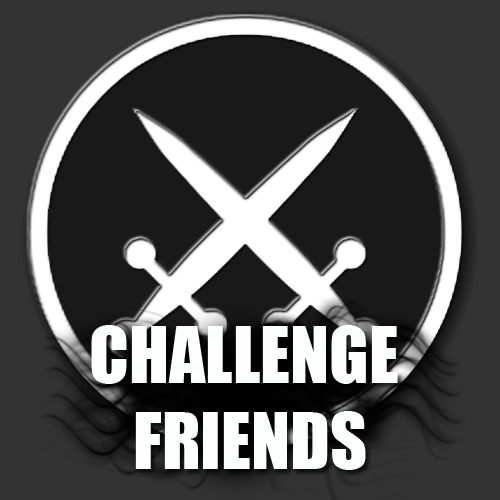
<style>
.page{position:relative;width:500px;height:500px;background:#191919}
.page>*{position:absolute;margin:0}
.t1{font:72px "Impact";color:#fdfefe}
</style>
<div class="page">
<p class="t1" style="left:91px;top:325px;width:307px;height:145px;text-align:center">CHALLENGE <br>FRIENDS</p>
</div>
